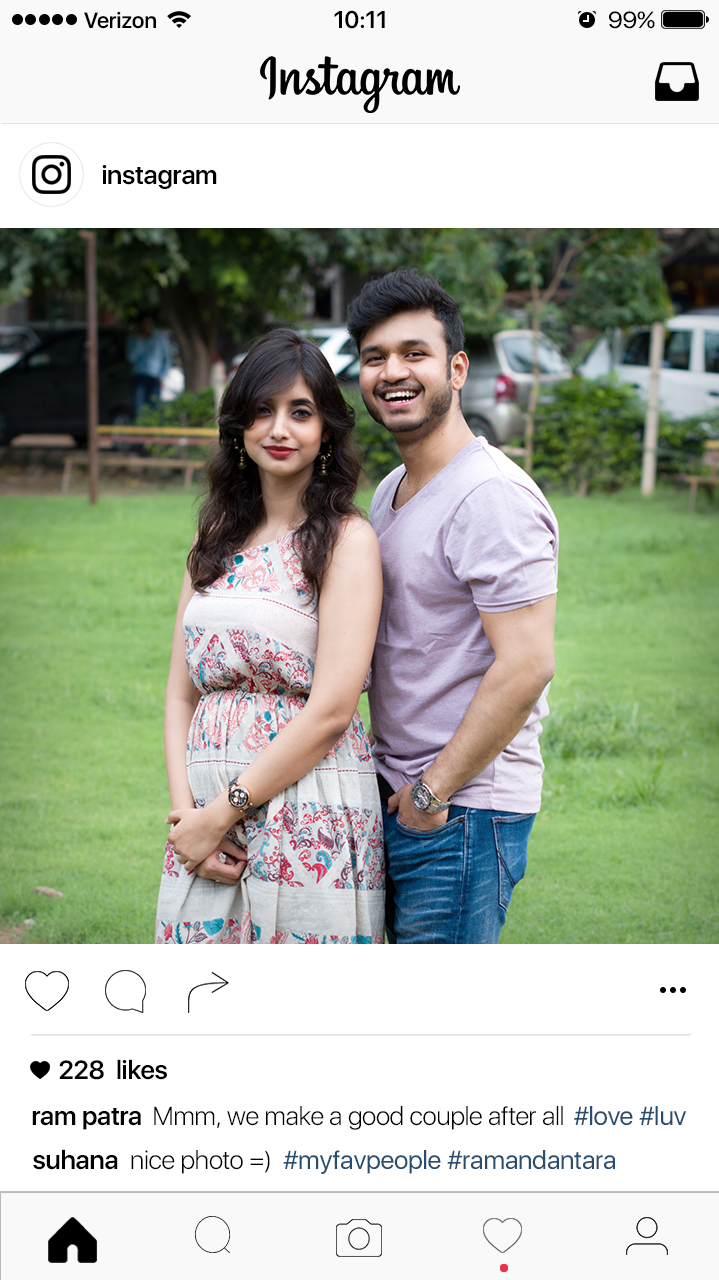
<style>
.page{position:relative;width:719px;height:1280px;background:#ffffff}
.page>*{position:absolute;margin:0}
.t1{font:22px "SFUIDisplay-Semibold";letter-spacing:-0.01em;color:#000000}
.t2{font:24px "SFUIDisplay-Semibold";letter-spacing:-0.01em;color:#000000}
.t3{font:23.2px "SFUIDisplay-Regular";letter-spacing:-0.01em;color:#000000;scale:1.07 1}
.t4{font:26px "SFUIDisplay-Semibold";letter-spacing:-0.01em;color:#000000}
.t5{font:26px "SFUIDisplay-Light";letter-spacing:-0.01em;color:#000000}
.t6{font:26px "SFUIDisplay-Regular";letter-spacing:-0.01em;color:#294d6c}
</style>
<div class="page">
<p class="t1" style="left:84px;top:11px;width:72px;height:18px">Verizon</p>
<p class="t2" style="left:334px;top:10px;width:51px;height:19px">10:11</p>
<p class="t3" style="left:609px;top:11px;width:46px;height:18px">99%</p>
<p class="t4" style="left:102px;top:165px;width:115px;height:24px">instagram</p>
<p class="t4" style="left:59px;top:1059px;width:108px;height:21px">228  likes</p>
<p class="t4" style="left:32px;top:1108px;width:109px;height:22px">ram patra</p>
<p class="t5" style="left:154px;top:1106px;width:409px;height:24px">Mmm, we make a good couple after all</p>
<p class="t6" style="left:574px;top:1106px;width:113px;height:19px">#love #luv</p>
<p class="t4" style="left:33px;top:1149px;width:85px;height:21px">suhana</p>
<p class="t5" style="left:131px;top:1150px;width:139px;height:24px">nice photo =)</p>
<p class="t6" style="left:283px;top:1150px;width:332px;height:24px">#myfavpeople #ramandantara</p>
</div>
